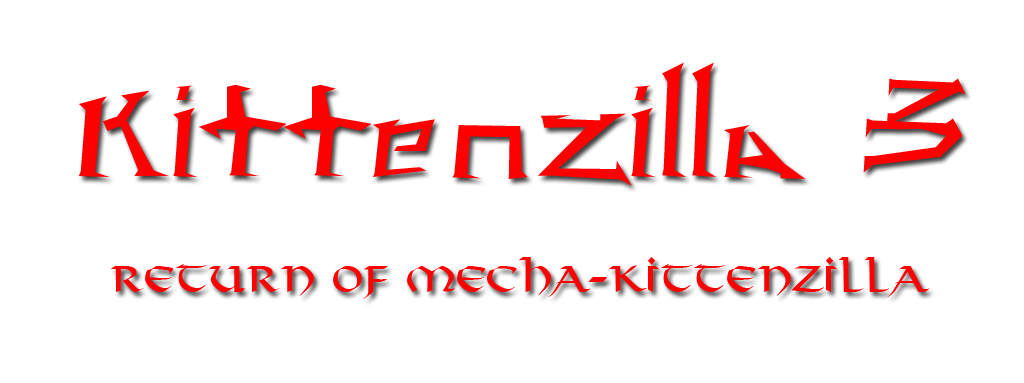
<style>
.page{position:relative;width:1024px;height:383px;background:#ffffff}
.page>*{position:absolute;margin:0}
.t1{font:36px "VikingPlain";color:#ff0000}
.t2{font:72px "rachalia";color:#ff0000}
</style>
<div class="page">
<p class="t1" style="left:78px;top:62px;width:888px;height:237px;text-align:center"><span class="t2">Kittenzilla 3<br><br><br></span>Return of Mecha-Kittenzilla</p>
</div>
